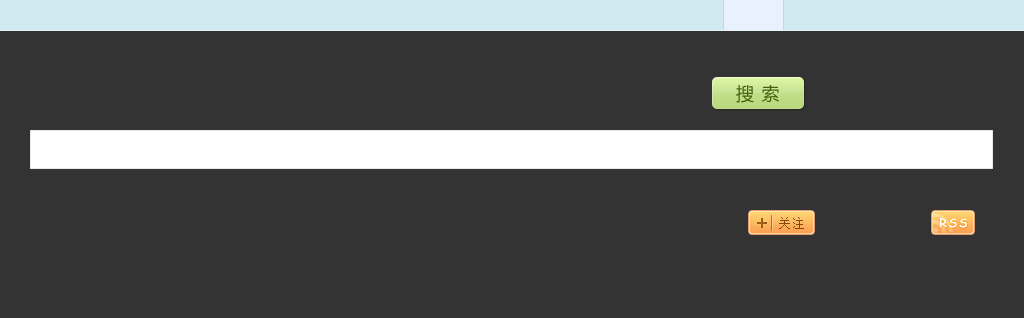
<style>
.page{position:relative;width:1024px;height:318px;background:#333333}
.page>*{position:absolute;margin:0}
.t1{font:18px "MicrosoftYaHei";letter-spacing:0.42em;color:#45630c;text-transform:uppercase}
.t2{font:18px "SimSun";letter-spacing:0.14em;color:#9f611f;font-weight:bold}
.t3{font:12px "SimSun";letter-spacing:0.14em;color:#884804;text-transform:uppercase}
.t4{font:12px "ComicSansMS";letter-spacing:0.14em;color:#ffffff;font-weight:bold}
</style>
<div class="page">
<p class="t1" style="left:736px;top:85px;width:43px;height:18px">搜索</p>
<p class="t2" style="left:757px;top:218px;width:10px;height:10px">+</p>
<p class="t3" style="left:779px;top:217px;width:25px;height:12px">关注</p>
<p class="t4" style="left:939px;top:218px;width:28px;height:10px">RSS</p>
</div>
